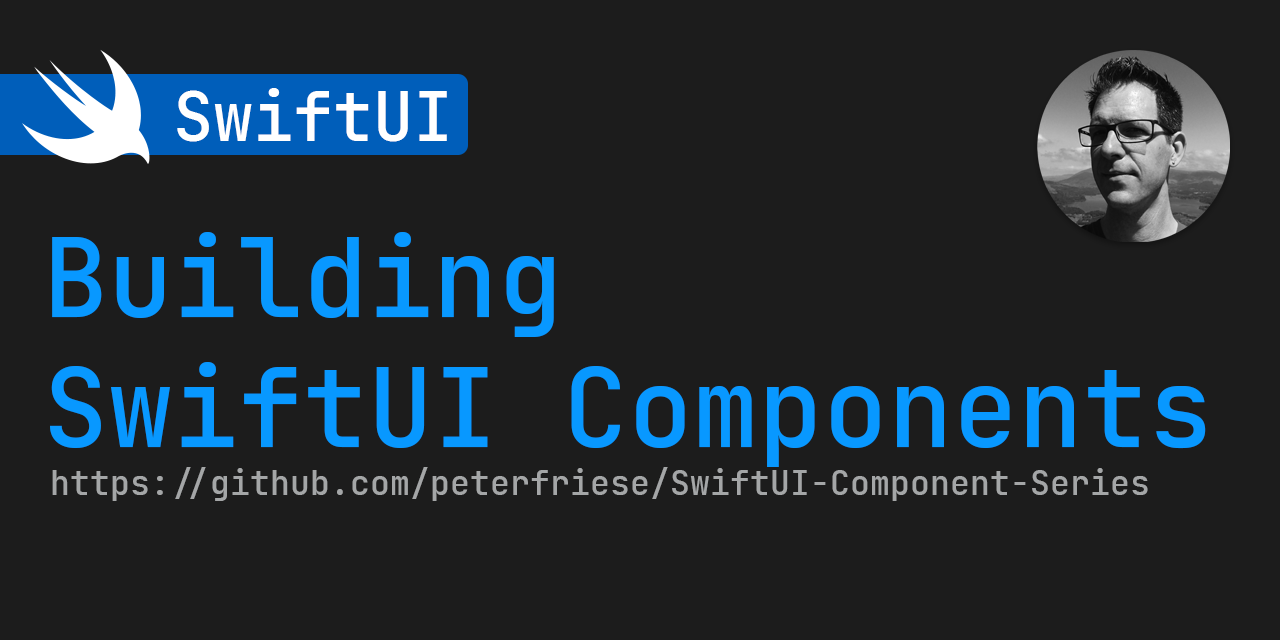
<style>
.page{position:relative;width:1280px;height:640px;background:#1c1c1c}
.page>*{position:absolute;margin:0}
.t1{font:66.7px "JetBrainsMono-Medium";color:#ffffff}
.t2{font:108.3px "JetBrainsMono-Medium";color:#0898ff}
.t3{font:33.3px "JetBrainsMono-Medium";color:#a4a6a7}
</style>
<div class="page">
<p class="t1" style="left:177px;top:88px;width:270px;height:54px">SwiftUI</p>
<p class="t2" style="left:50px;top:232px;width:1156px;height:235px">Building<br>SwiftUI Components</p>
<p class="t3" style="left:52px;top:467px;width:1096px;height:34px">https://github.com/peterfriese/SwiftUI-Component-Series</p>
</div>
